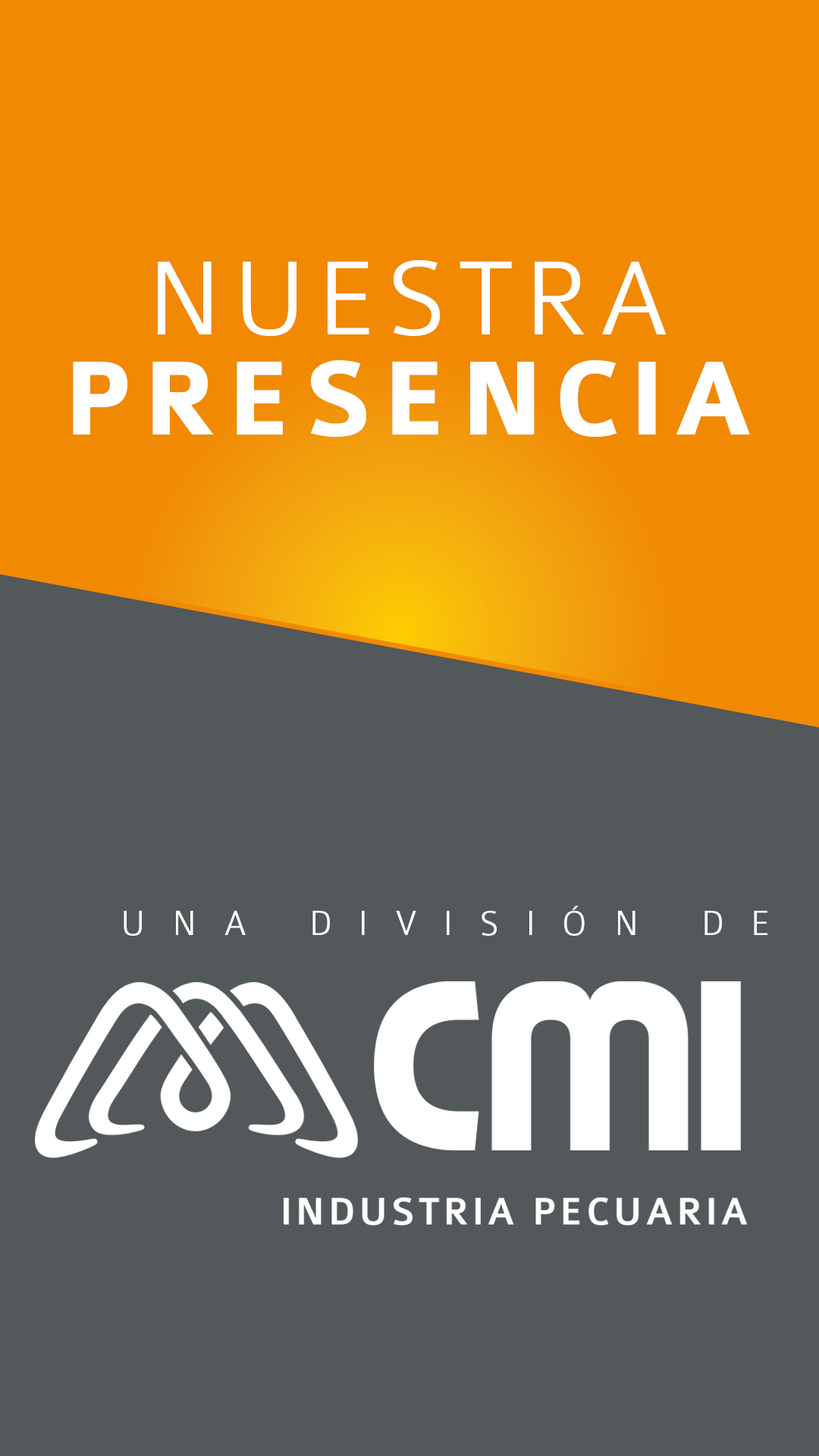
<style>
.page{position:relative;width:819px;height:1456px;background:#53585a}
.page>*{position:absolute;margin:0}
.t1{font:112.8px/100.6px "Colaborate-Bold";letter-spacing:0.08em;color:#ffffff}
.t2{font:112.8px/100.6px "Colaborate-Light";letter-spacing:0.08em;color:#ffffff}
.t3{font:36.4px "Colaborate-Light";letter-spacing:0.74em;color:#ffffff}
</style>
<div class="page">
<p class="t1" style="left:73px;top:260px;width:677px;height:178px;text-align:center"><span class="t2">NUESTRA<br></span>PRESENCIA</p>
<p class="t3" style="left:124px;top:905px;width:643px;height:31px">UNA DIVISIÓN DE</p>
</div>
